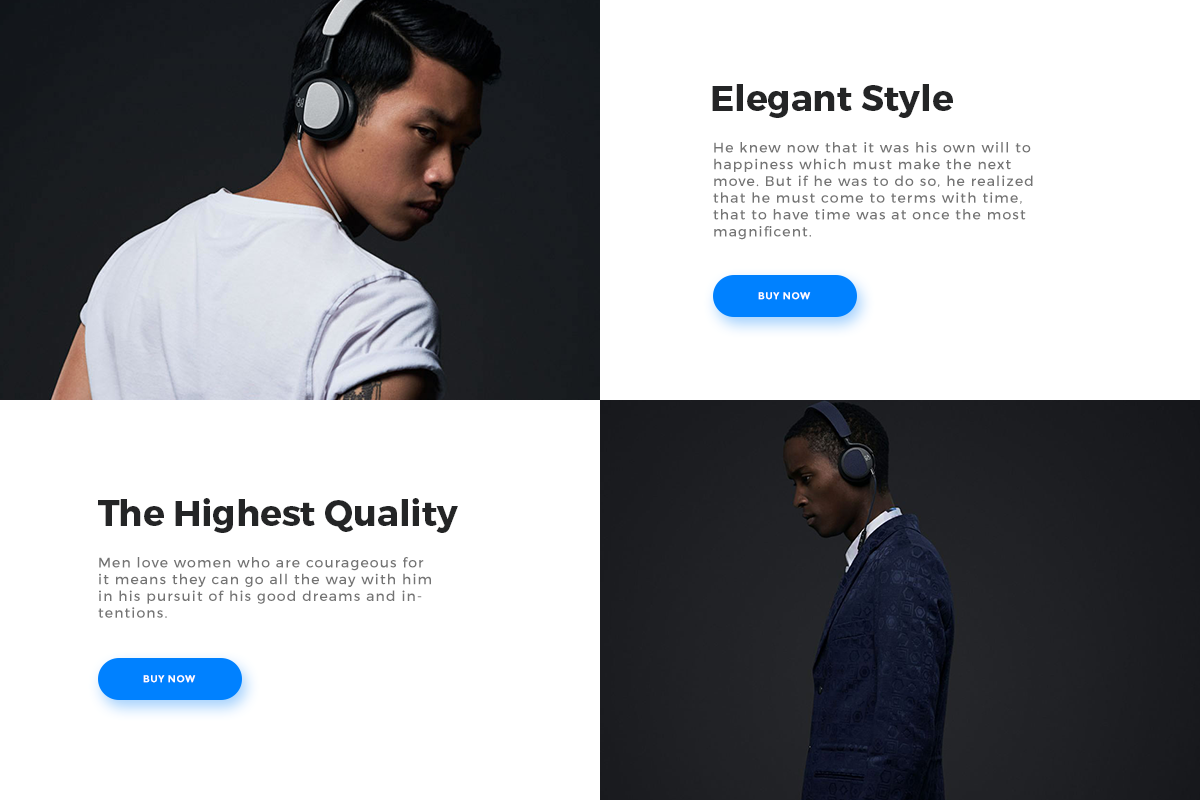
<style>
.page{position:relative;width:1200px;height:800px;background:#ffffff}
.page>*{position:absolute;margin:0}
.t1{font:36px "Montserrat-Bold";color:#242526}
.t2{font:14px "Montserrat-Regular";letter-spacing:0.08em;color:#747474}
.t3{font:10px "Montserrat-Bold";letter-spacing:0.04em;color:#ffffff;text-transform:uppercase}
</style>
<div class="page">
<p class="t1" style="left:712px;top:84px;width:241px;height:34px">Elegant Style</p>
<p class="t2" style="left:713px;top:142px;width:320px;height:98px">He knew now that it was his own will to happiness which must make the next move. But if he was to do so, he realized that he must come to terms with time, that to have time was at once the most magnificent.</p>
<p class="t3" style="left:758px;top:292px;width:53px;height:8px">buy NOW</p>
<p class="t1" style="left:98px;top:498px;width:360px;height:35px">The Highest Quality</p>
<p class="t2" style="left:98px;top:557px;width:333px;height:61px">Men love women who are courageous for it means they can go all the way with him in his pursuit of his good dreams and intentions.</p>
<p class="t3" style="left:143px;top:675px;width:53px;height:8px">buy NOW</p>
</div>
